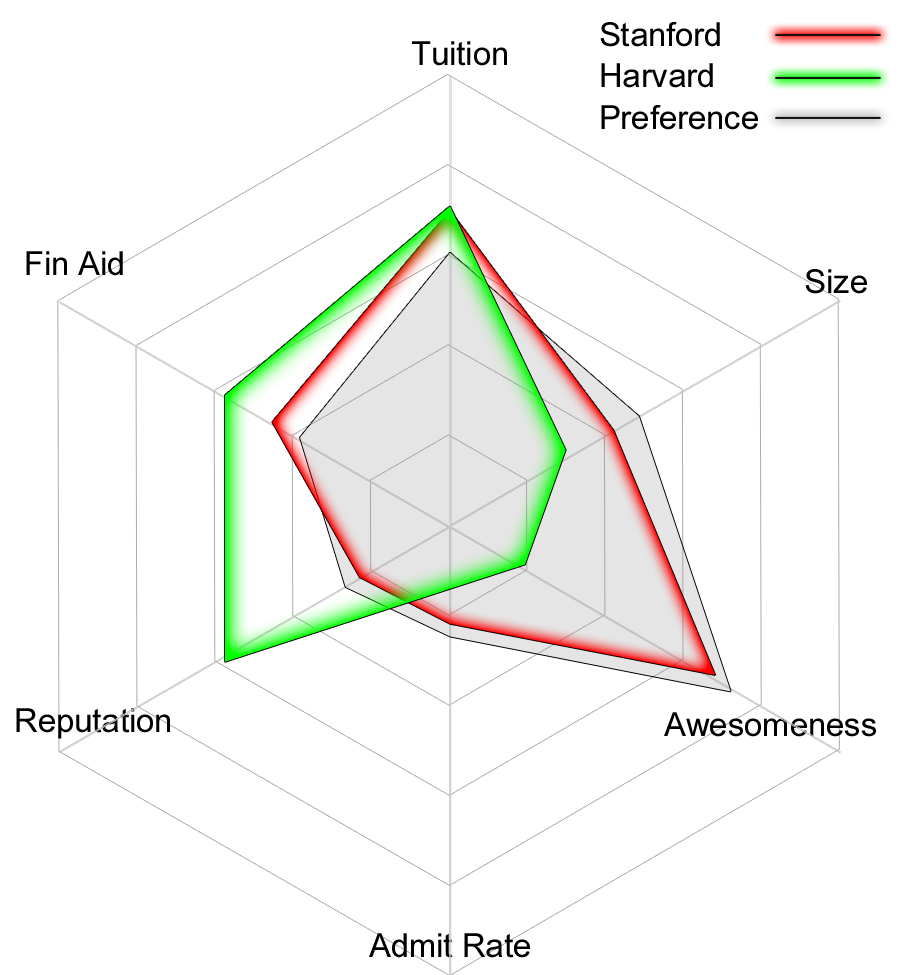
<style>
.page{position:relative;width:900px;height:975px;background:#ffffff}
.page>*{position:absolute;margin:0}
.t1{font:33.3px/41.7px "ArialNarrow";color:#000000;scale:1.2 1}
.t2{font:33.3px "ArialNarrow";color:#000000;scale:1.2 1}
</style>
<div class="page">
<p class="t1" style="left:600px;top:22px;width:158px;height:108px">Stanford<br>Harvard<br>Preference</p>
<p class="t2" style="left:412px;top:41px;width:95px;height:25px">Tuition</p>
<p class="t2" style="left:26px;top:251px;width:97px;height:25px">Fin Aid</p>
<p class="t2" style="left:805px;top:269px;width:62px;height:25px">Size</p>
<p class="t2" style="left:16px;top:708px;width:154px;height:31px">Reputation</p>
<p class="t2" style="left:664px;top:712px;width:212px;height:25px">Awesomeness</p>
<p class="t2" style="left:369px;top:933px;width:161px;height:25px">Admit Rate</p>
</div>
